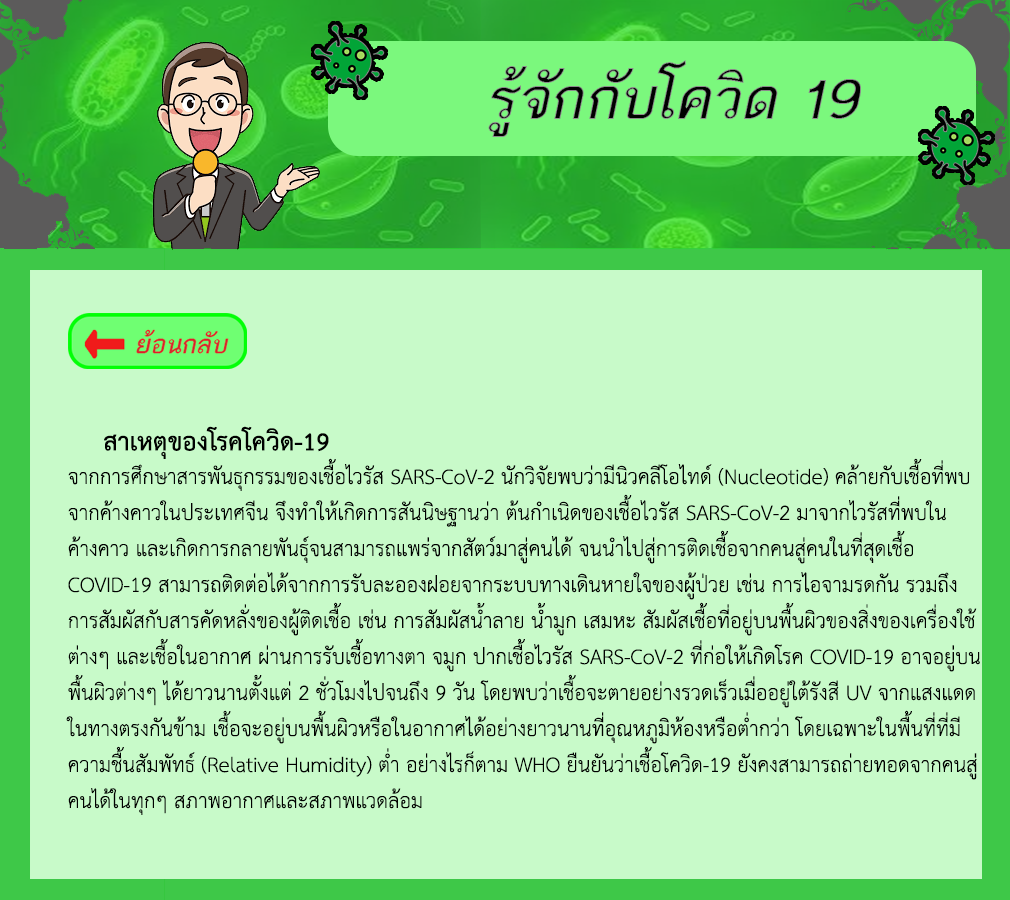
<style>
.page{position:relative;width:1010px;height:900px;background:#c8fac9}
.page>*{position:absolute;margin:0}
.t1{font:36px "THSarabunPSK-Bold";color:#000000}
.t2{font:30px "THSarabunPSK";color:#000000}
</style>
<div class="page">
<p class="t1" style="left:104px;top:426px;width:225px;height:33px">สาเหตุของโรคโควิด-19</p>
<p class="t2" style="left:66px;top:458px;width:914px;height:357px">จากการศึกษาสารพันธุกรรมของเชื้อไวรัส SARS-CoV-2 นักวิจัยพบว่ามีนิวคลีโอไทด์ (Nucleotide) คล้ายกับเชื้อที่พบ<br>จากค้างคาวในประเทศจีน จึงทำให้เกิดการสันนิษฐานว่า ต้นกำเนิดของเชื้อไวรัส SARS-CoV-2 มาจากไวรัสที่พบใน<br>ค้างคาว และเกิดการกลายพันธุ์จนสามารถแพร่จากสัตว์มาสู่คนได้ จนนำไปสู่การติดเชื้อจากคนสู่คนในที่สุดเชื้อ<br>COVID-19 สามารถติดต่อได้จากการรับละอองฝอยจากระบบทางเดินหายใจของผู้ป่วย เช่น การไอจามรดกัน รวมถึง<br>การสัมผัสกับสารคัดหลั่งของผู้ติดเชื้อ เช่น การสัมผัสน้ำลาย น้ำมูก เสมหะ สัมผัสเชื้อที่อยู่บนพื้นผิวของสิ่งของเครื่องใช้<br>ต่างๆ และเชื้อในอากาศ ผ่านการรับเชื้อทางตา จมูก ปากเชื้อไวรัส SARS-CoV-2 ที่ก่อให้เกิดโรค COVID-19 อาจอยู่บน<br>พื้นผิวต่างๆ ได้ยาวนานตั้งแต่ 2 ชั่วโมงไปจนถึง 9 วัน โดยพบว่าเชื้อจะตายอย่างรวดเร็วเมื่ออยู่ใต้รังสี UV จากแสงแดด<br>ในทางตรงกันข้าม เชื้อจะอยู่บนพื้นผิวหรือในอากาศได้อย่างยาวนานที่อุณหภูมิห้องหรือต่ำกว่า โดยเฉพาะในพื้นที่ที่มี<br>ความชื้นสัมพัทธ์ (Relative Humidity) ต่ำ อย่างไรก็ตาม WHO ยืนยันว่าเชื้อโควิด-19 ยังคงสามารถถ่ายทอดจากคนสู่<br>คนได้ในทุกๆ สภาพอากาศและสภาพแวดล้อม</p>
</div>
